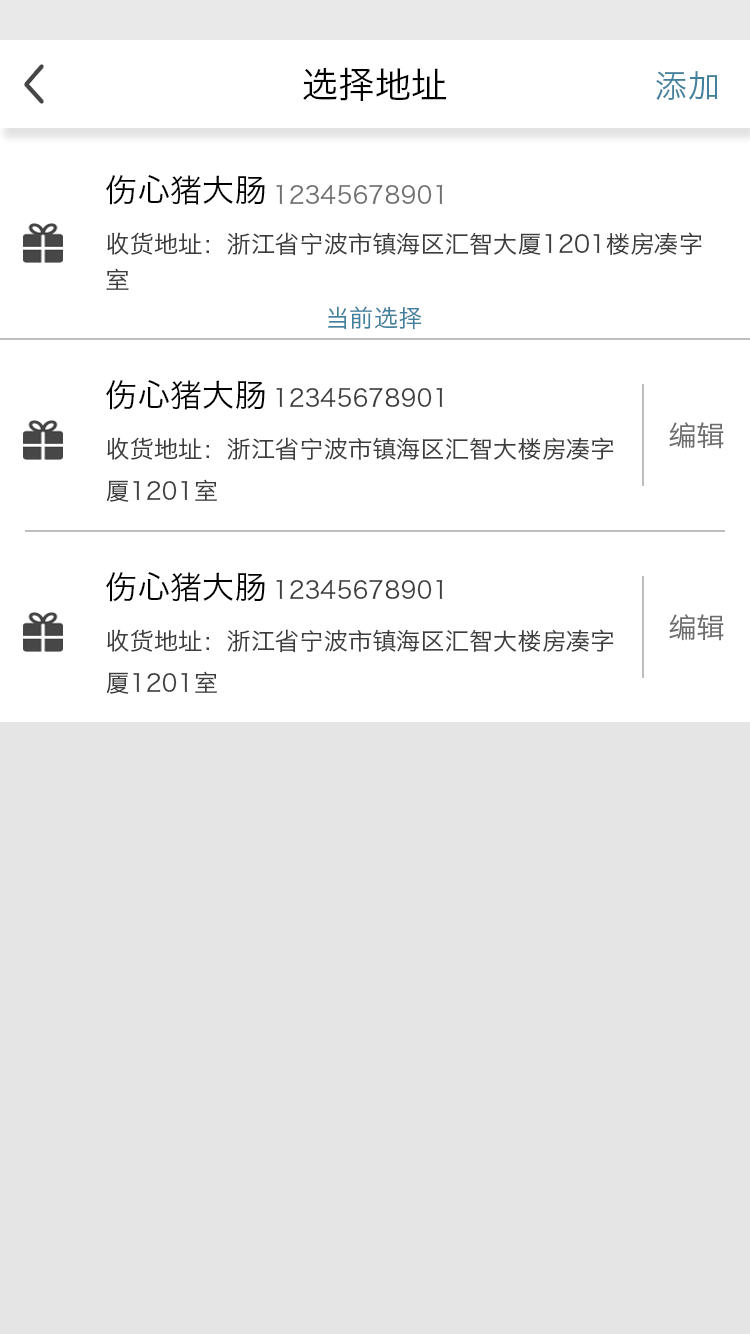
<style>
.page{position:relative;width:750px;height:1334px;background:#e5e5e5}
.page>*{position:absolute;margin:0}
.t1{font:36px "HiraginoSansGB-W3";color:#000000}
.t2{font:32px "HiraginoSansGB-W3";color:#42819d}
.t3{font:32px "HiraginoSansGB-W3";color:#000000}
.t4{font:24px "HiraginoSansGB-W3";color:#6e6e6e}
.t5{font:24px/36px "HiraginoSansGB-W3";color:#3d3d3d}
.t6{font:24px "HiraginoSansGB-W3";color:#42819d}
.t7{font:24px "HiraginoSansGB-W3";color:#3d3d3d}
.t8{font:28px "HiraginoSansGB-W3";color:#6e6e6e}
.t9{font:24px/42px "HiraginoSansGB-W3";color:#3d3d3d}
</style>
<div class="page">
<p class="t1" style="left:303px;top:67px;width:144px;height:34px">选择地址</p>
<p class="t2" style="left:656px;top:71px;width:62px;height:29px">添加</p>
<p class="t3" style="left:106px;top:175px;width:159px;height:30px">伤心猪大肠</p>
<p class="t4" style="left:276px;top:184px;width:167px;height:21px">12345678901</p>
<p class="t5" style="left:106px;top:232px;width:596px;height:58px">收货地址：浙江省宁波市镇海区汇智大厦1201楼房凑字<br>室</p>
<p class="t6" style="left:328px;top:306px;width:94px;height:24px">当前选择</p>
<p class="t3" style="left:106px;top:380px;width:159px;height:30px">伤心猪大肠</p>
<p class="t7" style="left:276px;top:387px;width:167px;height:21px">12345678901</p>
<p class="t8" style="left:669px;top:422px;width:55px;height:27px">编辑</p>
<p class="t9" style="left:106px;top:437px;width:508px;height:65px">收货地址：浙江省宁波市镇海区汇智大楼房凑字<br>厦1201室</p>
<p class="t3" style="left:106px;top:572px;width:159px;height:30px">伤心猪大肠</p>
<p class="t7" style="left:276px;top:579px;width:167px;height:21px">12345678901</p>
<p class="t8" style="left:669px;top:614px;width:55px;height:27px">编辑</p>
<p class="t9" style="left:106px;top:629px;width:508px;height:65px">收货地址：浙江省宁波市镇海区汇智大楼房凑字<br>厦1201室</p>
</div>
